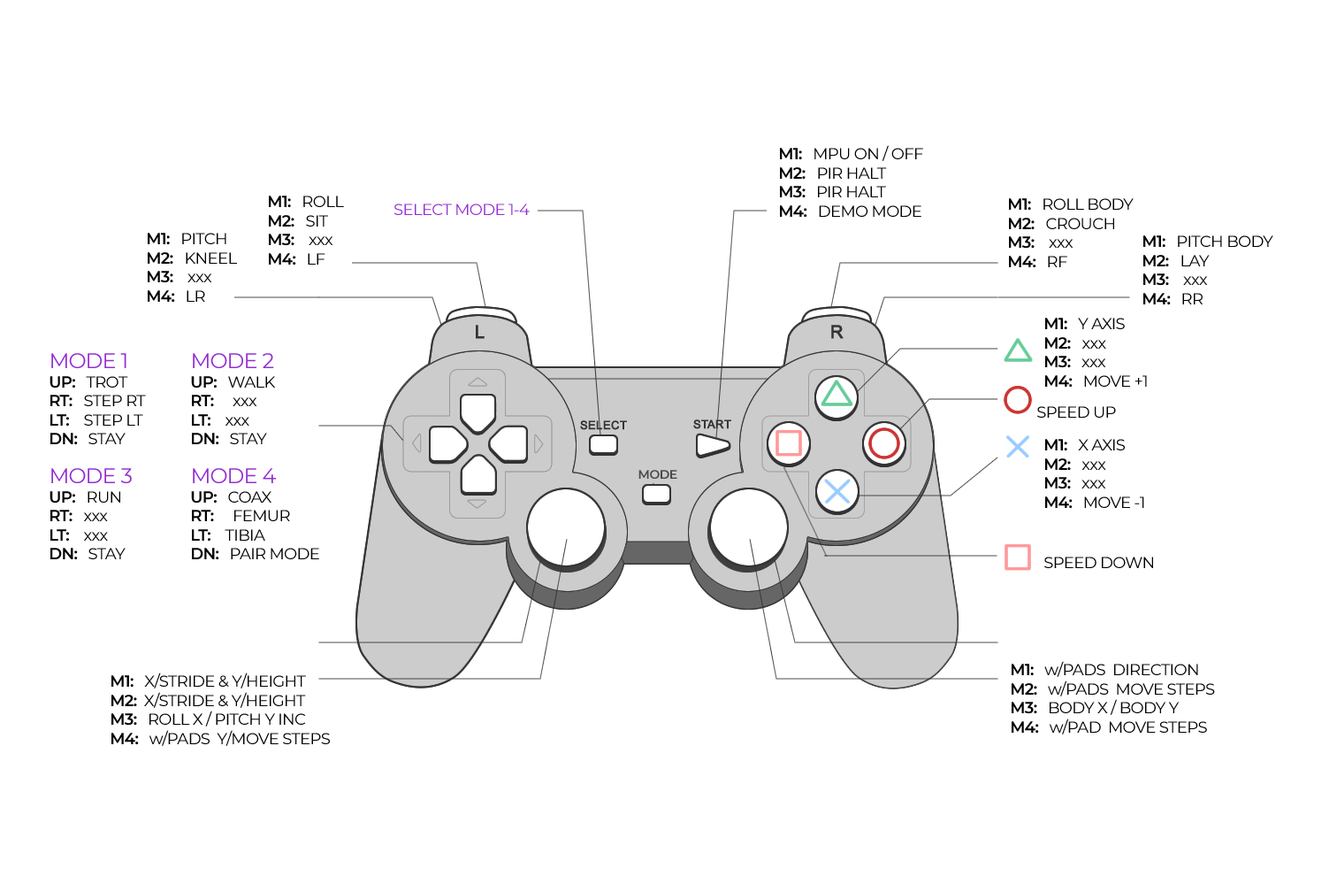
<style>
.page{position:relative;width:1337px;height:892px;background:#ffffff}
.page>*{position:absolute;margin:0}
.t1{font:15.9px "Montserrat-Regular";letter-spacing:-0.035em;color:#000000}
.t2{font:15.9px "Montserrat-SemiBold";letter-spacing:-0.035em;color:#000000}
.t3{font:15.9px "Montserrat-Regular";letter-spacing:-0.035em;color:#922dd3}
.t4{font:21.2px "Montserrat-Regular";letter-spacing:-0.035em;color:#922dd3}
.t5{font:12.4px "Montserrat-SemiBold";letter-spacing:-0.035em;color:#4a4a4a}
</style>
<div class="page">
<p class="t1" style="left:780px;top:145px;width:143px;height:73px"><span class="t2">M1: </span>  MPU ON / OFF<br><span class="t2">M2:   </span>PIR HALT<span class="t2"><br>M3: </span>  PIR HALT<br><span class="t2">M4: </span>  DEMO MODE</p>
<p class="t1" style="left:269px;top:195px;width:75px;height:70px"><span class="t2">M1: </span>  ROLL<br><span class="t2">M2:   </span>SIT<br><span class="t2">M3: </span>   xxx<br><span class="t2">M4:</span>   LF</p>
<p class="t3" style="left:394px;top:203px;width:136px;height:12px">SELECT MODE 1-4</p>
<p class="t1" style="left:1009px;top:198px;width:125px;height:70px"><span class="t2">M1: </span>  ROLL BODY<br><span class="t2">M2:   </span>CROUCH<br><span class="t2">M3: </span>   xxx<br><span class="t2">M4:</span>   RF</p>
<p class="t1" style="left:148px;top:233px;width:89px;height:70px"><span class="t2">M1: </span>  PITCH<br><span class="t2">M2:   </span>KNEEL<br><span class="t2">M3: </span>   xxx<br><span class="t2">M4:</span>   LR</p>
<p class="t1" style="left:1144px;top:235px;width:130px;height:70px"><span class="t2">M1: </span>  PITCH BODY<br><span class="t2">M2:   </span>LAY<br><span class="t2">M3: </span>   xxx<br><span class="t2">M4:</span>   RR</p>
<p class="t1" style="left:1046px;top:318px;width:101px;height:69px"><span class="t2">M1: </span>  Y AXIS<br><span class="t2">M2:   </span>xxx<br><span class="t2">M3: </span>  xxx<br><span class="t2">M4: </span>  MOVE +1</p>
<p class="t1" style="left:50px;top:353px;width:96px;height:92px"><span class="t4">MODE 1<br></span><span class="t2">UP: </span>  TROT<br><span class="t2">RT:   </span>STEP RT<br><span class="t2">LT: </span>   STEP LT<br><span class="t2">DN:</span>   STAY</p>
<p class="t4" style="left:191px;top:353px;width:85px;height:92px">MODE 2<br><span class="t2">UP: </span><span class="t1">  WALK<br></span><span class="t2">RT:     </span><span class="t1">xxx<br></span><span class="t2">LT: </span><span class="t1">   xxx<br></span><span class="t2">DN:</span><span class="t1">   STAY</span></p>
<p class="t1" style="left:1038px;top:406px;width:78px;height:11px">SPEED UP</p>
<p class="t1" style="left:1046px;top:439px;width:99px;height:70px"><span class="t2">M1: </span>  X AXIS<br><span class="t2">M2:  </span> xxx<br><span class="t2">M3: </span>  xxx<br><span class="t2">M4: </span>  MOVE -1</p>
<p class="t4" style="left:50px;top:468px;width:82px;height:92px">MODE 3<br><span class="t2">UP: </span><span class="t1">  RUN<br></span><span class="t2">RT:   </span><span class="t1">xxx</span><span class="t2"><br>LT: </span><span class="t1">   xxx<br></span><span class="t2">DN:</span><span class="t1">   STAY</span></p>
<p class="t1" style="left:191px;top:468px;width:128px;height:92px"><span class="t4">MODE 4<br></span><span class="t2">UP: </span>  COAX<br><span class="t2">RT:     </span>FEMUR<br><span class="t2">LT: </span>   TIBIA<br><span class="t2">DN:</span>   PAIR MODE</p>
<p class="t5" style="left:639px;top:470px;width:39px;height:9px">MODE</p>
<p class="t1" style="left:1045px;top:556px;width:108px;height:12px">SPEED DOWN</p>
<p class="t1" style="left:1012px;top:661px;width:203px;height:73px"><span class="t2">M1: </span>  w/PADS  DIRECTION<br><span class="t2">M2: </span>  w/PADS  MOVE STEPS<br><span class="t2">M3: </span>  BODY X / BODY Y  <br><span class="t2">M4: </span>  w/PAD  MOVE STEPS</p>
<p class="t1" style="left:111px;top:672px;width:219px;height:74px"><span class="t2">M1: </span>  X/STRIDE &amp; Y/HEIGHT<br><span class="t2">M2: </span> X/STRIDE &amp; Y/HEIGHT<br><span class="t2">M3: </span>  ROLL X / PITCH Y INC  <br><span class="t2">M4: </span>  w/PADS  Y/MOVE STEPS</p>
</div>
